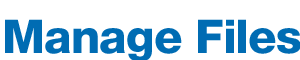
<style>
.page{position:relative;width:300px;height:60px;background:#ffffff}
.page>*{position:absolute;margin:0}
.t1{font:46.5px "HelveticaNeue-Heavy";letter-spacing:-0.018em;color:#006cb3}
</style>
<div class="page">
<p class="t1" style="left:5px;top:19px;width:296px;height:43px">Manage Files</p>
</div>
